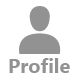
<style>
.page{position:relative;width:80px;height:83px;background:#ffffff}
.page>*{position:absolute;margin:0}
.t1{font:20px "SegoeUI-Bold";color:#929292}
</style>
<div class="page">
<p class="t1" style="left:9px;top:58px;width:61px;height:15px">Profile</p>
</div>
